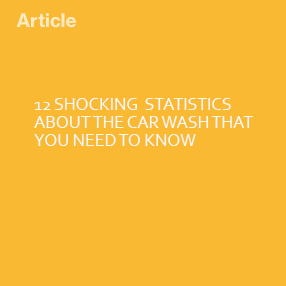
<style>
.page{position:relative;width:286px;height:286px;background:#fab933}
.page>*{position:absolute;margin:0}
.t1{font:18px/18px "Corbel";letter-spacing:-0.01em;color:#f9f8f7}
</style>
<div class="page">
<p class="t1" style="left:34px;top:98px;width:219px;height:48px">12 SHOCKING  STATISTICS<br>ABOUT THE CAR WASH THAT<br>YOU NEED TO KNOW</p>
</div>
